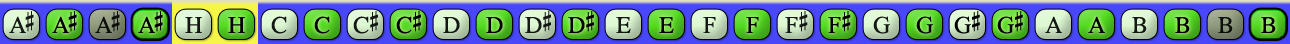
<style>
.page{position:relative;width:1290px;height:44px}
.page>*{position:absolute;margin:0}
.t1{font:24px "OpusChords";letter-spacing:-0.1em;color:#000000}
.t2{font:24px "OpusChords";color:#000000}
.t3{font:24px "OpusChords";letter-spacing:-0.025em;color:#000000}
</style>
<div class="page">
<p class="t1" style="left:9px;top:11px;width:25px;height:22px;opacity:0.9">A#</p>
<p class="t1" style="left:52px;top:11px;width:25px;height:22px">A#</p>
<p class="t1" style="left:95px;top:11px;width:25px;height:22px;opacity:0.9">A#</p>
<p class="t1" style="left:138px;top:11px;width:25px;height:22px">A#</p>
<p class="t2" style="left:185px;top:17px;width:17px;height:16px;opacity:0.9">H</p>
<p class="t2" style="left:228px;top:17px;width:17px;height:16px">H</p>
<p class="t2" style="left:271px;top:16px;width:16px;height:18px;opacity:0.9">C</p>
<p class="t2" style="left:314px;top:16px;width:16px;height:18px">C</p>
<p class="t2" style="left:353px;top:11px;width:25px;height:23px;opacity:0.9">C#</p>
<p class="t2" style="left:396px;top:11px;width:25px;height:23px">C#</p>
<p class="t2" style="left:443px;top:17px;width:17px;height:16px;opacity:0.9">D</p>
<p class="t2" style="left:486px;top:17px;width:17px;height:16px">D</p>
<p class="t3" style="left:525px;top:11px;width:26px;height:22px;opacity:0.9">D#</p>
<p class="t3" style="left:568px;top:11px;width:26px;height:22px">D#</p>
<p class="t2" style="left:616px;top:17px;width:15px;height:16px;opacity:0.9">E</p>
<p class="t2" style="left:659px;top:17px;width:15px;height:16px">E</p>
<p class="t2" style="left:703px;top:17px;width:13px;height:16px;opacity:0.9">F</p>
<p class="t2" style="left:746px;top:17px;width:13px;height:16px">F</p>
<p class="t2" style="left:785px;top:11px;width:23px;height:22px;opacity:0.9">F#</p>
<p class="t2" style="left:828px;top:11px;width:23px;height:22px">F#</p>
<p class="t2" style="left:873px;top:16px;width:17px;height:18px;opacity:0.9">G</p>
<p class="t2" style="left:916px;top:16px;width:17px;height:18px">G</p>
<p class="t3" style="left:954px;top:11px;width:26px;height:23px">G#</p>
<p class="t3" style="left:997px;top:11px;width:26px;height:23px">G#</p>
<p class="t2" style="left:1045px;top:16px;width:17px;height:17px;opacity:0.9">A</p>
<p class="t2" style="left:1088px;top:16px;width:17px;height:17px">A</p>
<p class="t2" style="left:1132px;top:17px;width:15px;height:16px;opacity:0.9">B</p>
<p class="t2" style="left:1175px;top:17px;width:15px;height:16px">B</p>
<p class="t2" style="left:1218px;top:17px;width:15px;height:16px;opacity:0.9">B</p>
<p class="t2" style="left:1261px;top:17px;width:15px;height:16px">B</p>
</div>
